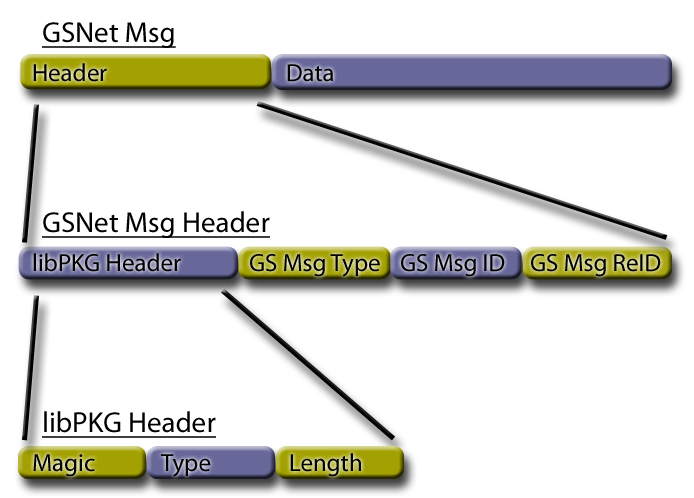
<style>
.page{position:relative;width:694px;height:498px;background:#ffffff}
.page>*{position:absolute;margin:0}
.t1{font:29.1px "MyriadPro-Regular";color:#000000;text-decoration:underline}
.t2{font:24.9px "MyriadPro-Regular";color:#000000}
</style>
<div class="page">
<p class="t1" style="left:42px;top:22px;width:134px;height:26px">GSNet Msg</p>
<p class="t2" style="left:33px;top:63px;width:74px;height:19px">Header</p>
<p class="t2" style="left:287px;top:64px;width:46px;height:18px">Data</p>
<p class="t1" style="left:42px;top:211px;width:228px;height:27px">GSNet Msg Header</p>
<p class="t2" style="left:33px;top:253px;width:148px;height:19px">libPKG Header</p>
<p class="t2" style="left:250px;top:254px;width:130px;height:23px">GS Msg Type</p>
<p class="t2" style="left:401px;top:254px;width:104px;height:23px">GS Msg ID</p>
<p class="t2" style="left:531px;top:254px;width:130px;height:23px">GS Msg ReID</p>
<p class="t1" style="left:42px;top:411px;width:174px;height:27px">libPKG Header</p>
<p class="t2" style="left:33px;top:454px;width:62px;height:23px">Magic</p>
<p class="t2" style="left:161px;top:454px;width:50px;height:23px">Type</p>
<p class="t2" style="left:290px;top:453px;width:71px;height:24px">Length</p>
</div>
